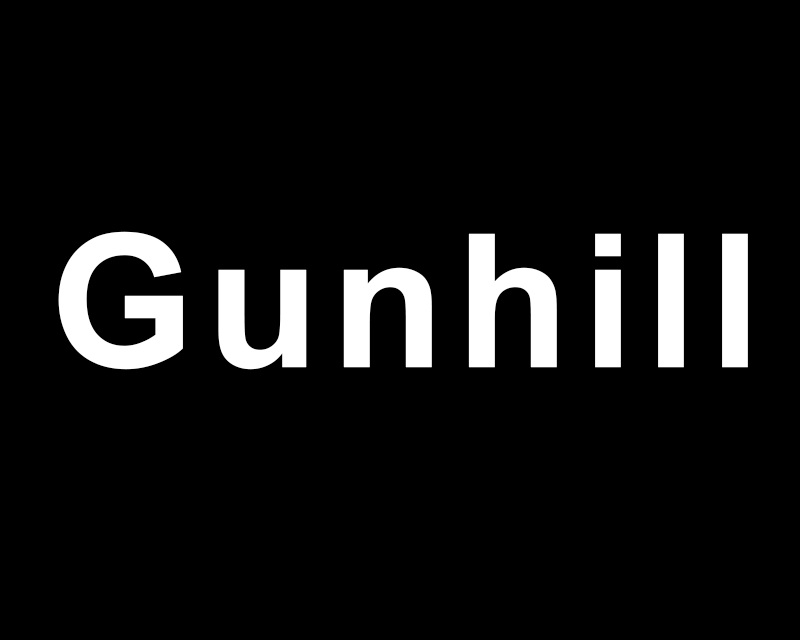
<style>
.page{position:relative;width:800px;height:640px;background:#000000}
.page>*{position:absolute;margin:0}
.t1{font:184.5px "Arial-BoldMT";letter-spacing:0.04em;color:#ffffff;font-weight:bold}
</style>
<div class="page">
<p class="t1" style="left:58px;top:231px;width:690px;height:139px">Gunhill</p>
</div>
